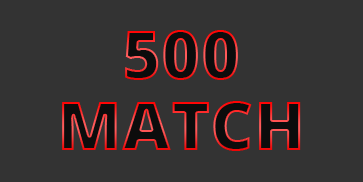
<style>
.page{position:relative;width:363px;height:182px;background:#333333}
.page>*{position:absolute;margin:0}
.t1{font:67px "OpenSans-Extrabold"}
</style>
<div class="page">
<p class="t1" style="left:125px;top:30px;width:113px;height:50px">500</p>
<p class="t1" style="left:62px;top:101px;width:239px;height:50px">MATCH</p>
</div>
